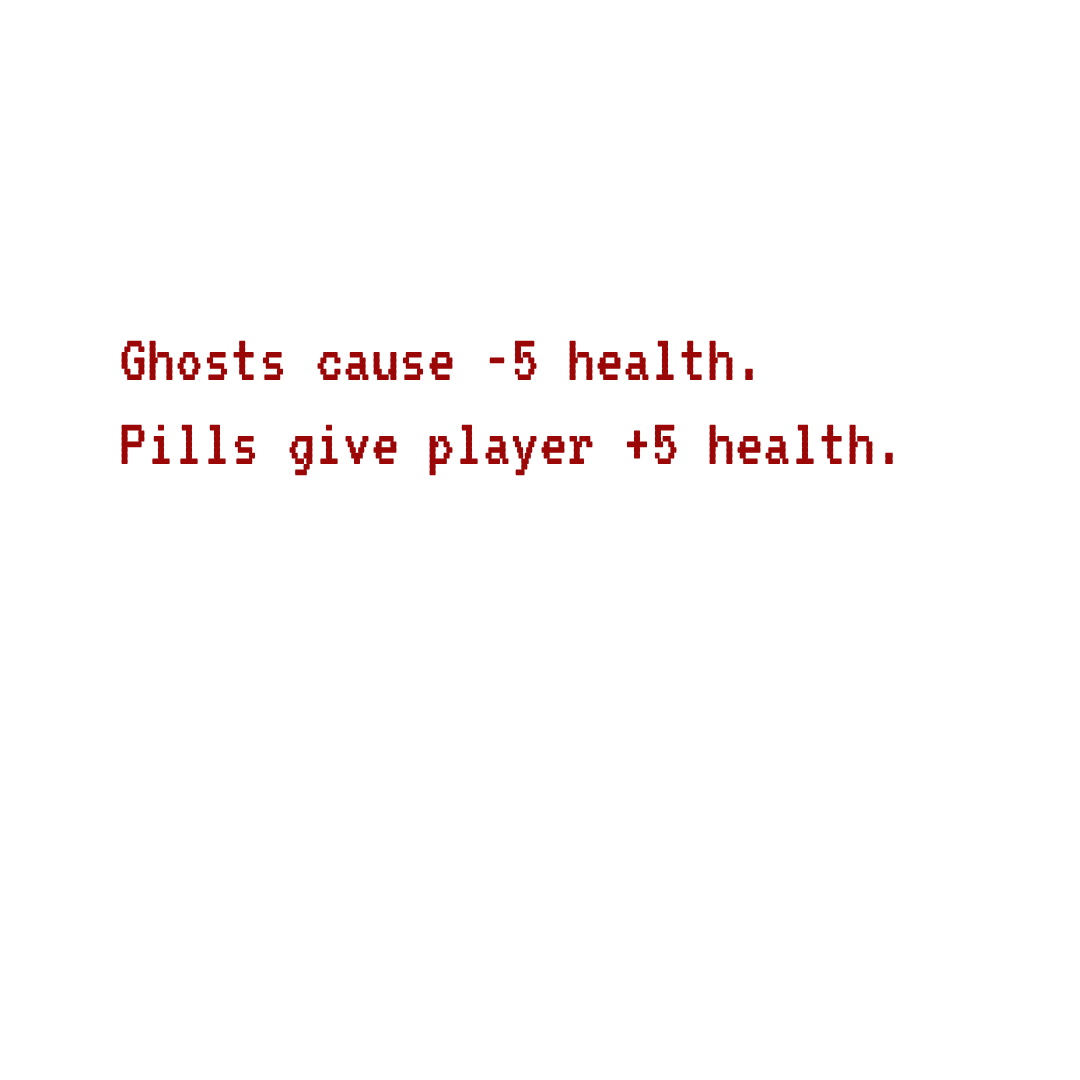
<style>
.page{position:relative;width:1080px;height:1080px;background:#ffffff}
.page>*{position:absolute;margin:0}
.t1{font:70px "VT323-Regular";color:#9b0707}
</style>
<div class="page">
<p class="t1" style="left:121px;top:340px;width:772px;height:136px">Ghosts cause -5 health.<br>Pills give player +5 health.</p>
</div>
